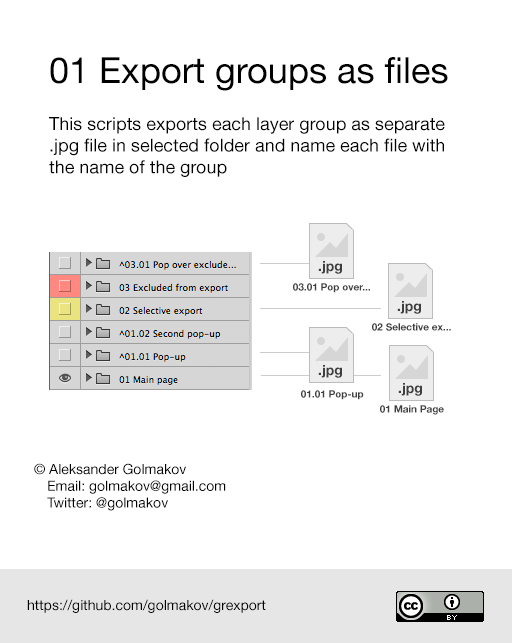
<style>
.page{position:relative;width:512px;height:643px;background:#ffffff}
.page>*{position:absolute;margin:0}
.t1{font:36px "HelveticaNeue";color:#000000}
.t2{font:18px "HelveticaNeue";color:#000000}
.t3{font:10px "HelveticaNeue-Bold";color:#3f3f3f}
.t4{font:14px "HelveticaNeue";color:#000000}
</style>
<div class="page">
<p class="t1" style="left:50px;top:57px;width:398px;height:34px">01 Export groups as files</p>
<p class="t2" style="left:49px;top:117px;width:396px;height:60px">This scripts exports each layer group as separate<br>.jpg file in selected folder and name each file with <br>the name of the group</p>
<p class="t3" style="left:293px;top:283px;width:77px;height:10px">03.01 Pop over...</p>
<p class="t3" style="left:372px;top:323px;width:79px;height:8px">02 Selective ex...</p>
<p class="t3" style="left:301px;top:390px;width:63px;height:10px">01.01 Pop-up</p>
<p class="t3" style="left:380px;top:405px;width:64px;height:10px">01 Main Page</p>
<p class="t4" style="left:34px;top:463px;width:192px;height:48px">© Aleksander Golmakov<br>Email: golmakov@gmail.com<br>Twitter: @golmakov</p>
<p class="t4" style="left:27px;top:599px;width:239px;height:14px">https://github.com/golmakov/grexport</p>
</div>
